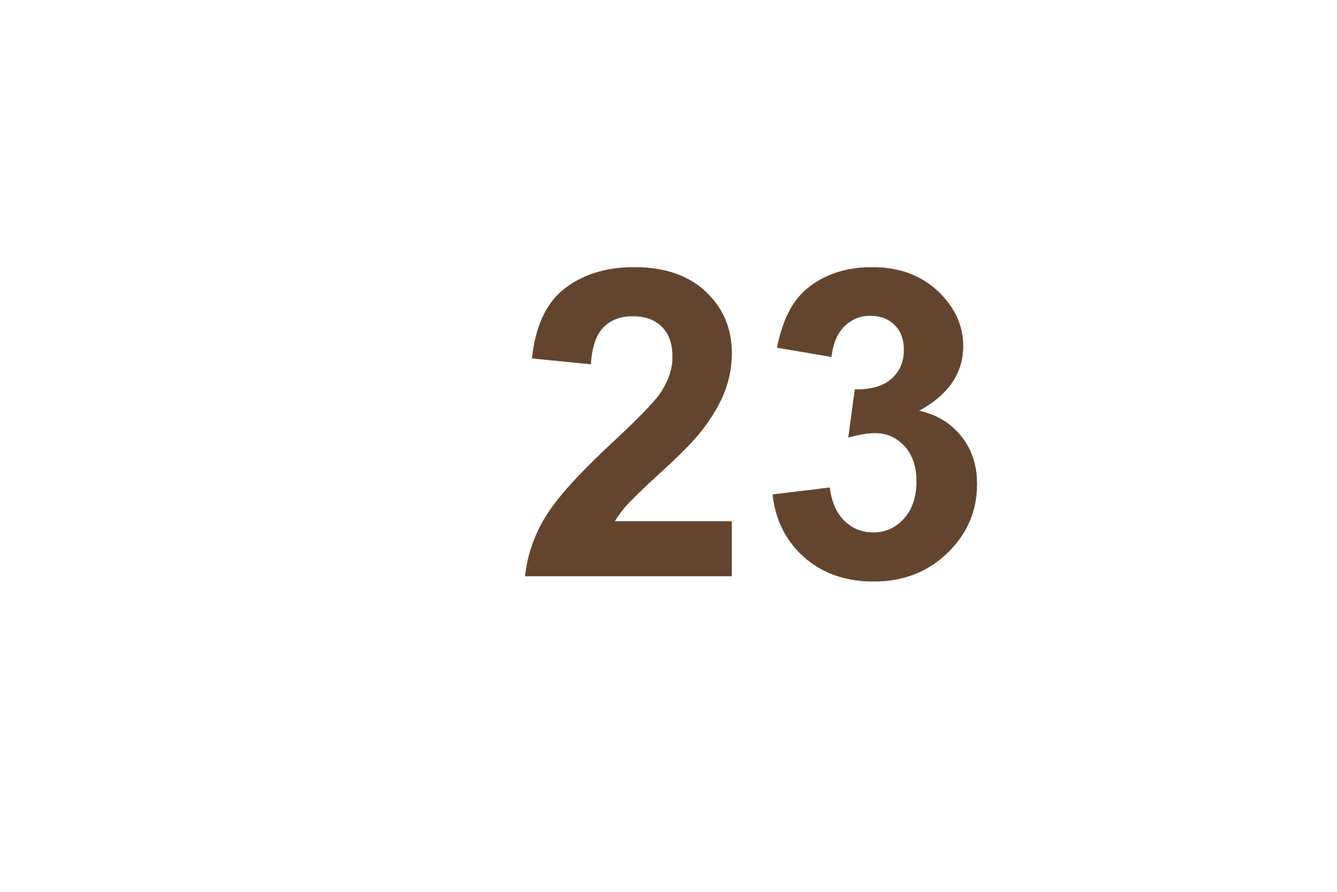
<style>
.page{position:relative;width:1337px;height:892px;background:#ffffff}
.page>*{position:absolute;margin:0}
.t1{font:429.6px "Arial-BoldMT";color:#63442f}
</style>
<div class="page">
<p class="t1" style="left:525px;top:267px;width:453px;height:315px">23</p>
</div>
